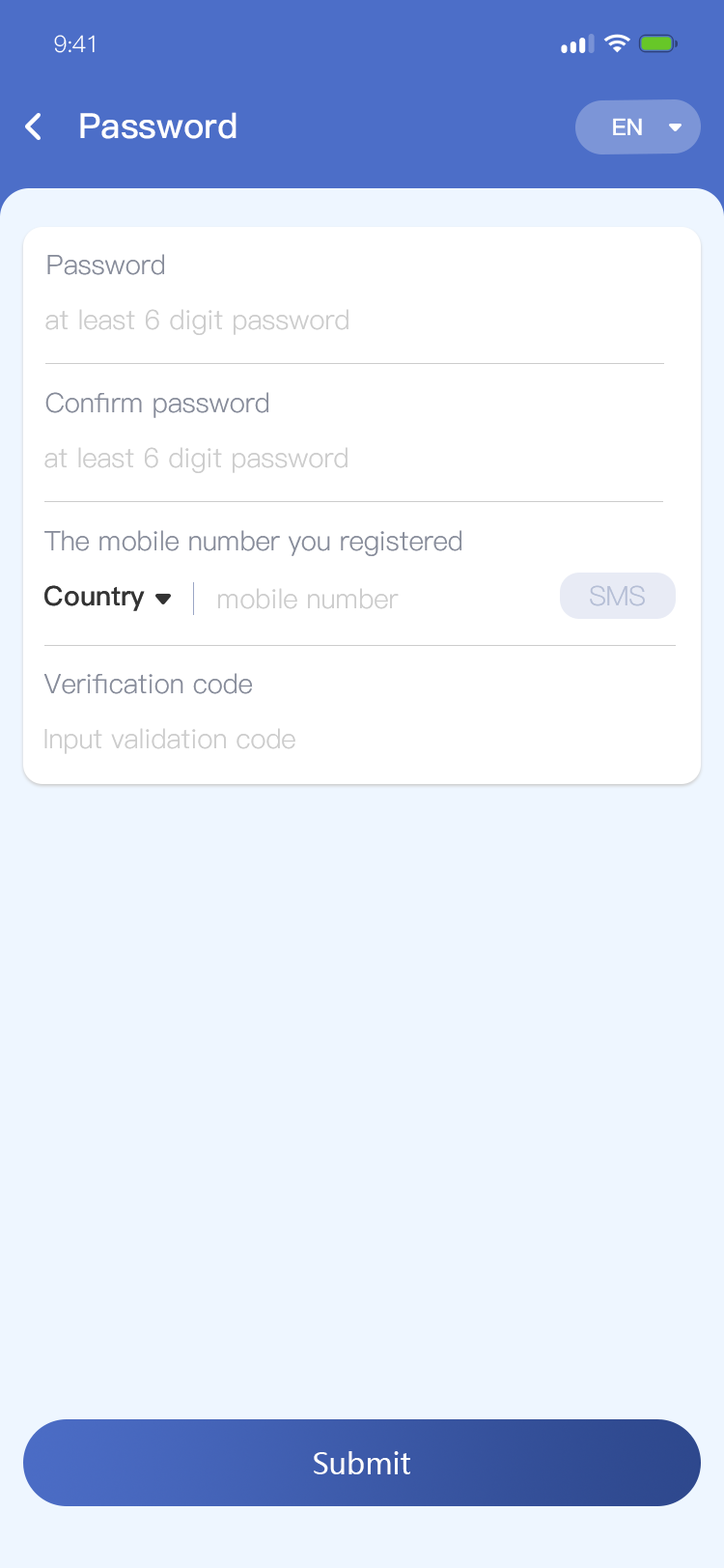
<style>
.page{position:relative;width:724px;height:1568px;background:#eef6ff}
.page>*{position:absolute;margin:0}
.t1{font:23.2px "PingFang-SC-Regular";letter-spacing:-0.025em;color:#ffffff}
.t2{font:34.8px "PingFang-SC-Bold";color:#ffffff}
.t3{font:34.8px "PingFang-SC-Bold";color:#ffffff;text-transform:uppercase}
.t4{font:23.2px "PingFang-SC-Bold";color:#ffffff}
.t5{font:27px "PingFang-SC-Regular";color:#878c9a}
.t6{font:27px "PingFang-SC-Regular";color:#878c9a;text-transform:uppercase}
.t7{font:27px "PingFang-SC-Regular";color:#cccccc}
.t8{font:27px "PingFang-SC-Bold";color:#333333}
.t9{font:27px "PingFang-SC-Bold";color:#333333;text-transform:uppercase}
.t10{font:27px "PingFang-SC-Regular";color:#b6bfd6;text-transform:uppercase}
.t11{font:29px "MicrosoftYaHei";color:#ffffff}
</style>
<div class="page">
<p class="t1" style="left:54px;top:35px;width:41px;height:18px">9:41</p>
<p class="t2" style="left:80px;top:112px;width:157px;height:27px"><span class="t3">p</span>assword</p>
<p class="t4" style="left:613px;top:118px;width:29px;height:17px">EN</p>
<p class="t5" style="left:47px;top:254px;width:117px;height:21px"><span class="t6">p</span>assword</p>
<p class="t7" style="left:45px;top:309px;width:304px;height:26px">at least 6 digit password</p>
<p class="t5" style="left:45px;top:392px;width:223px;height:26px"><span class="t6">c</span>onfirm password</p>
<p class="t7" style="left:44px;top:447px;width:304px;height:26px">at least 6 digit password</p>
<p class="t5" style="left:44px;top:530px;width:418px;height:26px"><span class="t6">t</span>he mobile number you registered</p>
<p class="t8" style="left:44px;top:585px;width:101px;height:26px"><span class="t9">C</span>ountry</p>
<p class="t7" style="left:218px;top:588px;width:181px;height:21px">mobile number</p>
<p class="t10" style="left:590px;top:585px;width:55px;height:21px">SMS</p>
<p class="t5" style="left:43px;top:673px;width:210px;height:21px"><span class="t6">v</span>erification code</p>
<p class="t7" style="left:44px;top:728px;width:251px;height:26px">Input validation code</p>
<p class="t11" style="left:314px;top:1451px;width:96px;height:23px">Submit</p>
</div>
